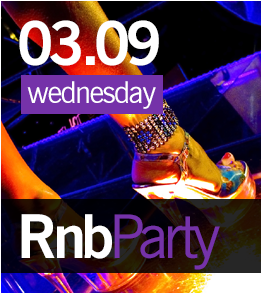
<style>
.page{position:relative;width:261px;height:293px}
.page>*{position:absolute;margin:0}
.t1{font:60px "NewsGothicBT-Bold";letter-spacing:-0.075em;color:#ffffff}
.t2{font:30px "NewsGothicBT-Roman";letter-spacing:-0.05em;color:#ffffff}
.t3{font:60px "NewsGothicBT-Roman";letter-spacing:-0.075em;color:#7532a9}
</style>
<div class="page">
<p class="t1" style="left:19px;top:20px;width:140px;height:46px">03.09</p>
<p class="t2" style="left:27px;top:81px;width:129px;height:28px">wednesday</p>
<p class="t3" style="left:21px;top:214px;width:199px;height:56px"><span class="t1">Rnb</span>Party</p>
</div>
